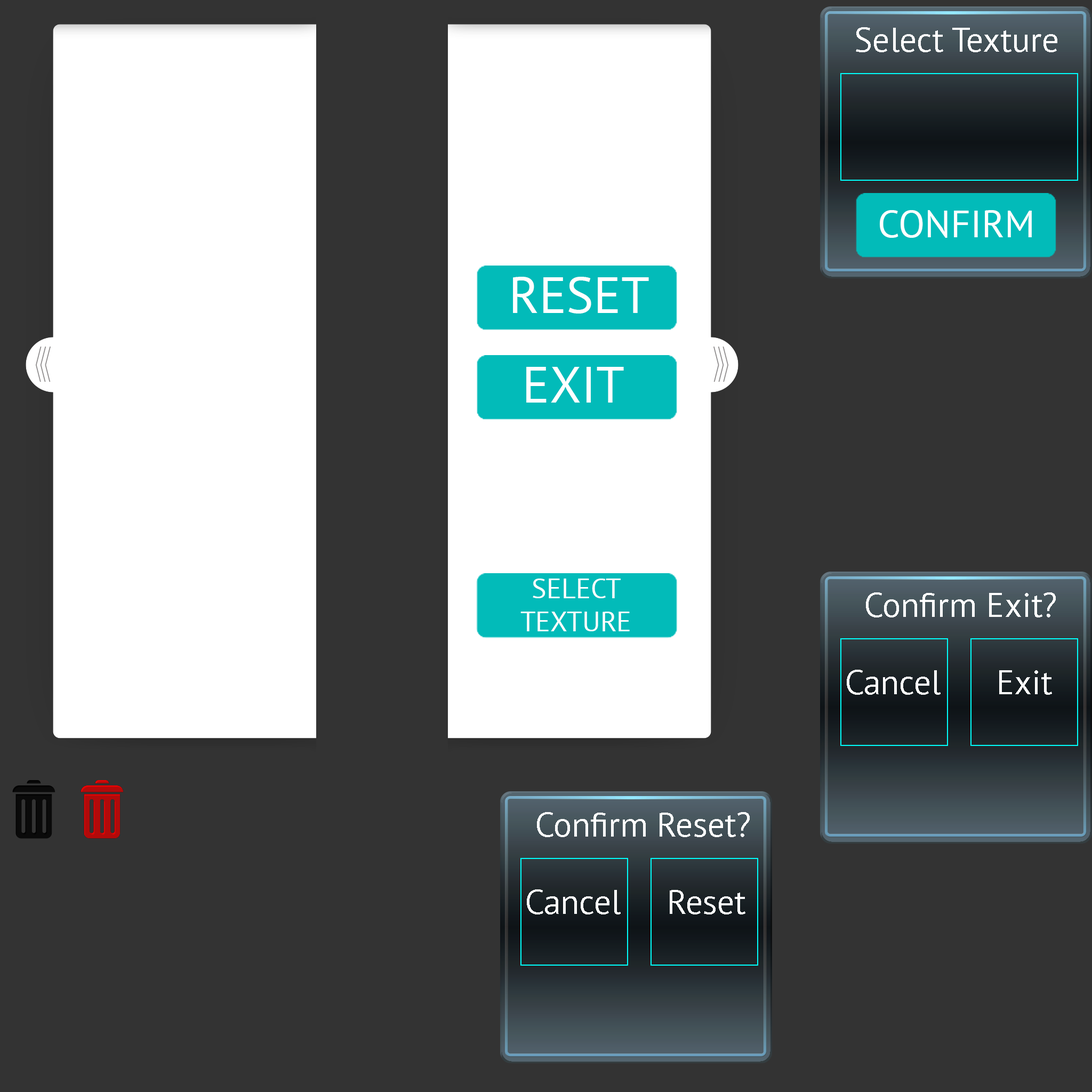
<style>
.page{position:relative;width:1092px;height:1092px;background:#333333}
.page>*{position:absolute;margin:0}
.t1{font:34.1px "PTSans-Regular";color:#ffffff}
.t2{font:27.7px "PTSans-Regular";color:#ffffff}
</style>
<div class="page">
<p class="t1" style="left:856px;top:27px;width:201px;height:25px">Select Texture</p>
<p class="t2" style="left:520px;top:579px;width:110px;height:52px;text-align:center">SELECT<br>TEXTURE</p>
<p class="t1" style="left:866px;top:592px;width:190px;height:25px">Confirm Exit?</p>
<p class="t1" style="left:847px;top:670px;width:205px;height:25px">Cancel      Exit</p>
<p class="t1" style="left:537px;top:812px;width:213px;height:25px">Confirm Reset?</p>
<p class="t1" style="left:527px;top:889px;width:218px;height:25px">Cancel     Reset</p>
</div>
